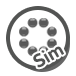
<style>
.page{position:relative;width:76px;height:76px;background:#ffffff}
.page>*{position:absolute;margin:0}
.t1{font:18.8px "MikadoMedium";color:#535453}
</style>
<div class="page">
<p class="t1" style="left:33px;top:46px;width:31px;height:22px;rotate:-30deg">Sim</p>
</div>
